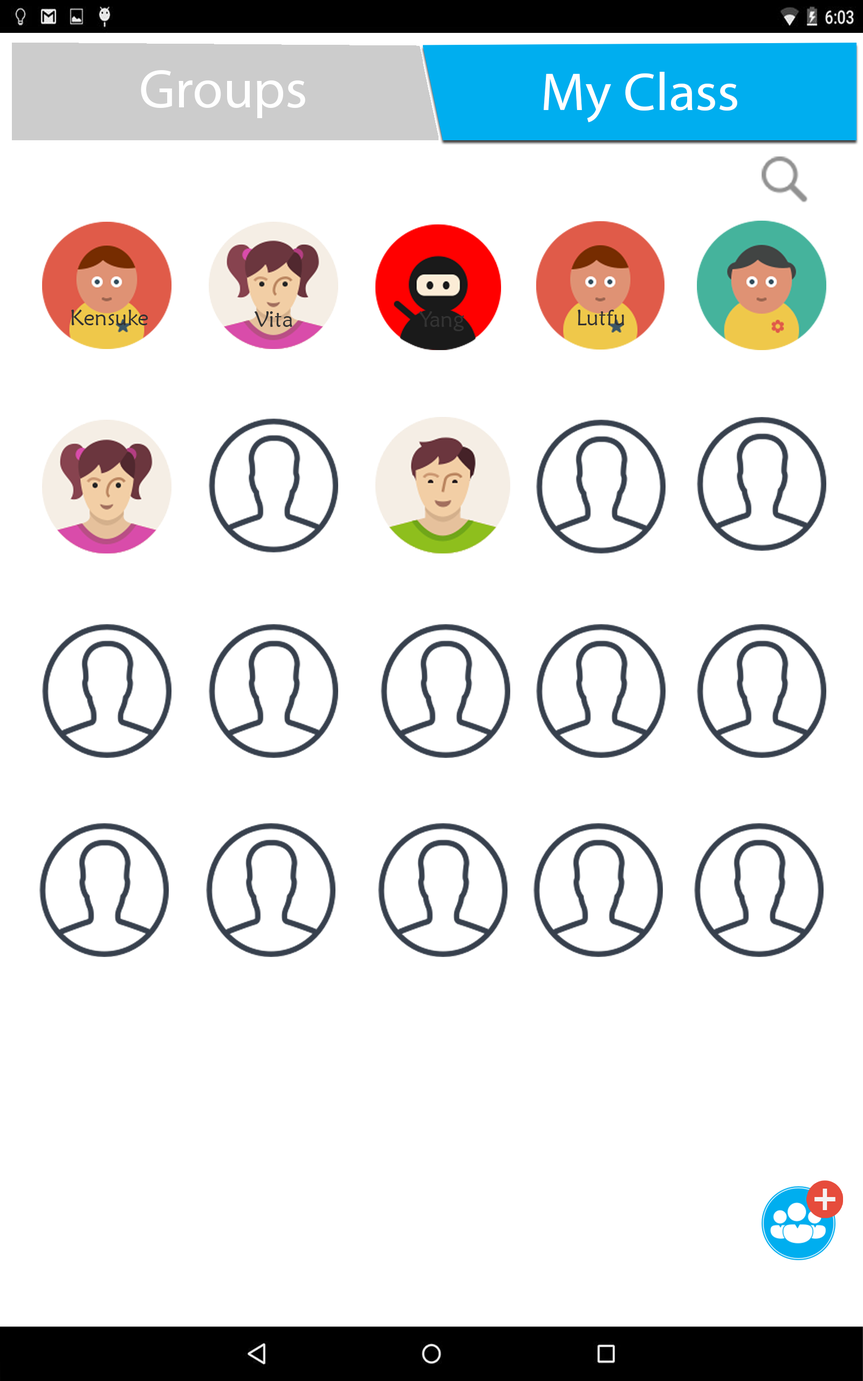
<style>
.page{position:relative;width:863px;height:1381px;background:#ffffff}
.page>*{position:absolute;margin:0}
.t1{font:54.1px "MyriadPro-Regular";color:#ffffff}
.t2{font:54px "MyriadPro-Regular";color:#ffffff}
.t3{font:22.5px "MaiandraGD-Regular";color:#333333}
</style>
<div class="page">
<p class="t1" style="left:141px;top:70px;width:164px;height:48px">Groups</p>
<p class="t2" style="left:544px;top:72px;width:194px;height:50px">My Class</p>
<p class="t3" style="left:71px;top:310px;width:77px;height:15px">Kensuke</p>
<p class="t3" style="left:254px;top:311px;width:38px;height:16px">Vita</p>
<p class="t3" style="left:419px;top:311px;width:46px;height:20px">Yang</p>
<p class="t3" style="left:578px;top:310px;width:47px;height:15px">Lutfu</p>
</div>
